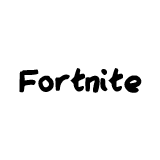
<style>
.page{position:relative;width:160px;height:160px;background:#ffffff}
.page>*{position:absolute;margin:0}
.t1{font:35.9px "QAReports";color:#000000}
</style>
<div class="page">
<p class="t1" style="left:19px;top:68px;width:123px;height:25px">Fortnite</p>
</div>
